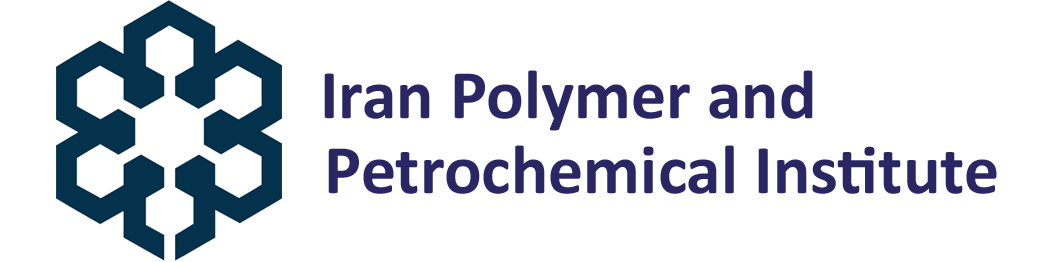
<style>
.page{position:relative;width:1053px;height:262px;background:#ffffff}
.page>*{position:absolute;margin:0}
.t1{font:70px "Calibri-Bold";color:#292663}
</style>
<div class="page">
<p class="t1" style="left:324px;top:70px;width:489px;height:61px">Iran Polymer and</p>
<p class="t1" style="left:328px;top:145px;width:669px;height:49px">Petrochemical Institute</p>
</div>
